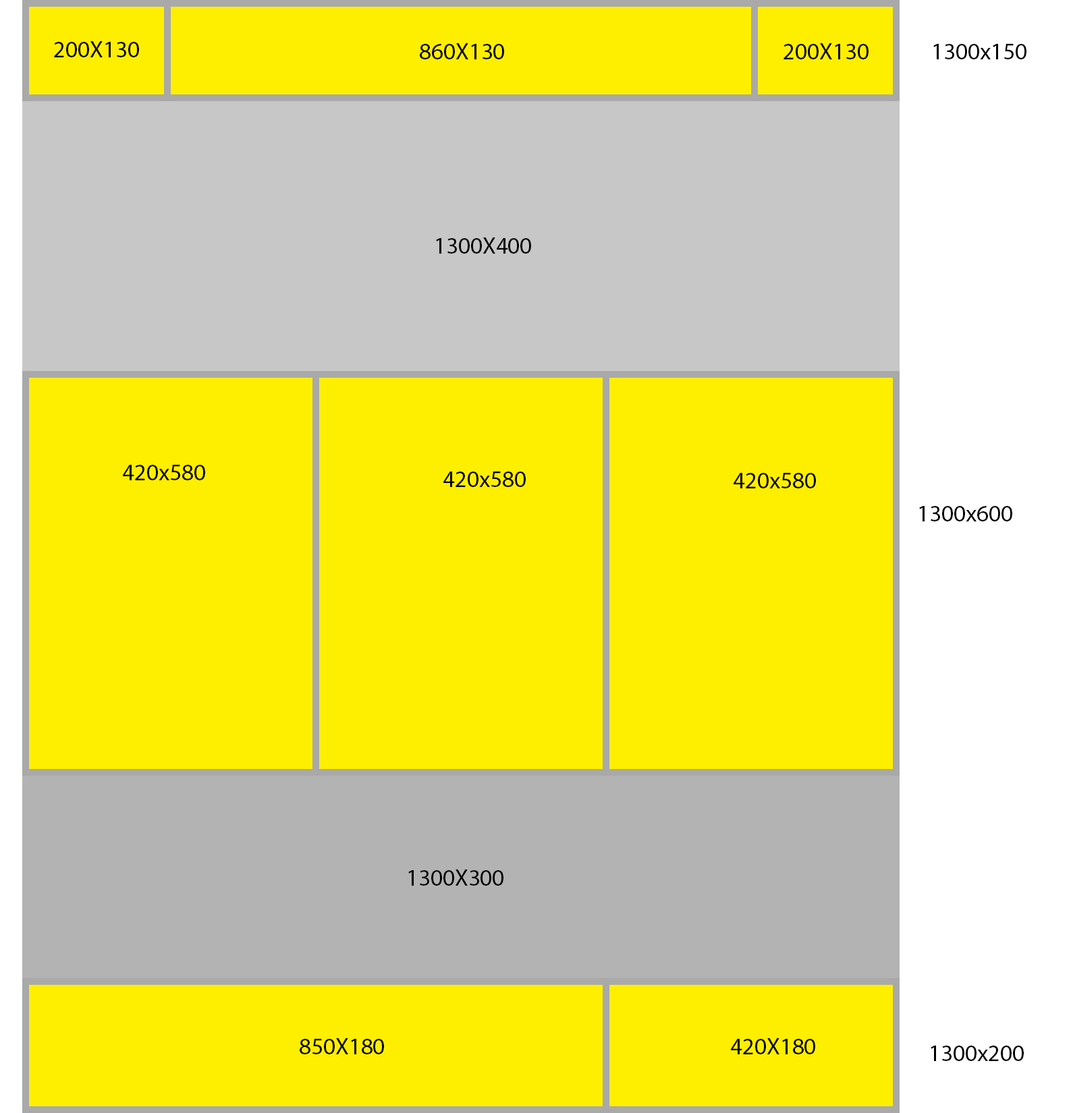
<style>
.page{position:relative;width:1071px;height:1113px;background:#feee00}
.page>*{position:absolute;margin:0}
.t1{font:23.6px "MyriadPro-Regular";color:#000000}
</style>
<div class="page">
<p class="t1" style="left:54px;top:41px;width:85px;height:16px">200X130</p>
<p class="t1" style="left:420px;top:43px;width:84px;height:16px">860X130</p>
<p class="t1" style="left:783px;top:43px;width:85px;height:16px">200X130</p>
<p class="t1" style="left:933px;top:44px;width:93px;height:15px">1300x150</p>
<p class="t1" style="left:436px;top:238px;width:95px;height:16px">1300X400</p>
<p class="t1" style="left:123px;top:465px;width:82px;height:15px">420x580</p>
<p class="t1" style="left:443px;top:472px;width:83px;height:15px">420x580</p>
<p class="t1" style="left:734px;top:473px;width:82px;height:16px">420x580</p>
<p class="t1" style="left:919px;top:506px;width:93px;height:16px">1300x600</p>
<p class="t1" style="left:408px;top:870px;width:95px;height:16px">1300X300</p>
<p class="t1" style="left:300px;top:1039px;width:84px;height:16px">850X180</p>
<p class="t1" style="left:731px;top:1039px;width:84px;height:16px">420X180</p>
<p class="t1" style="left:931px;top:1046px;width:93px;height:15px">1300x200</p>
</div>
